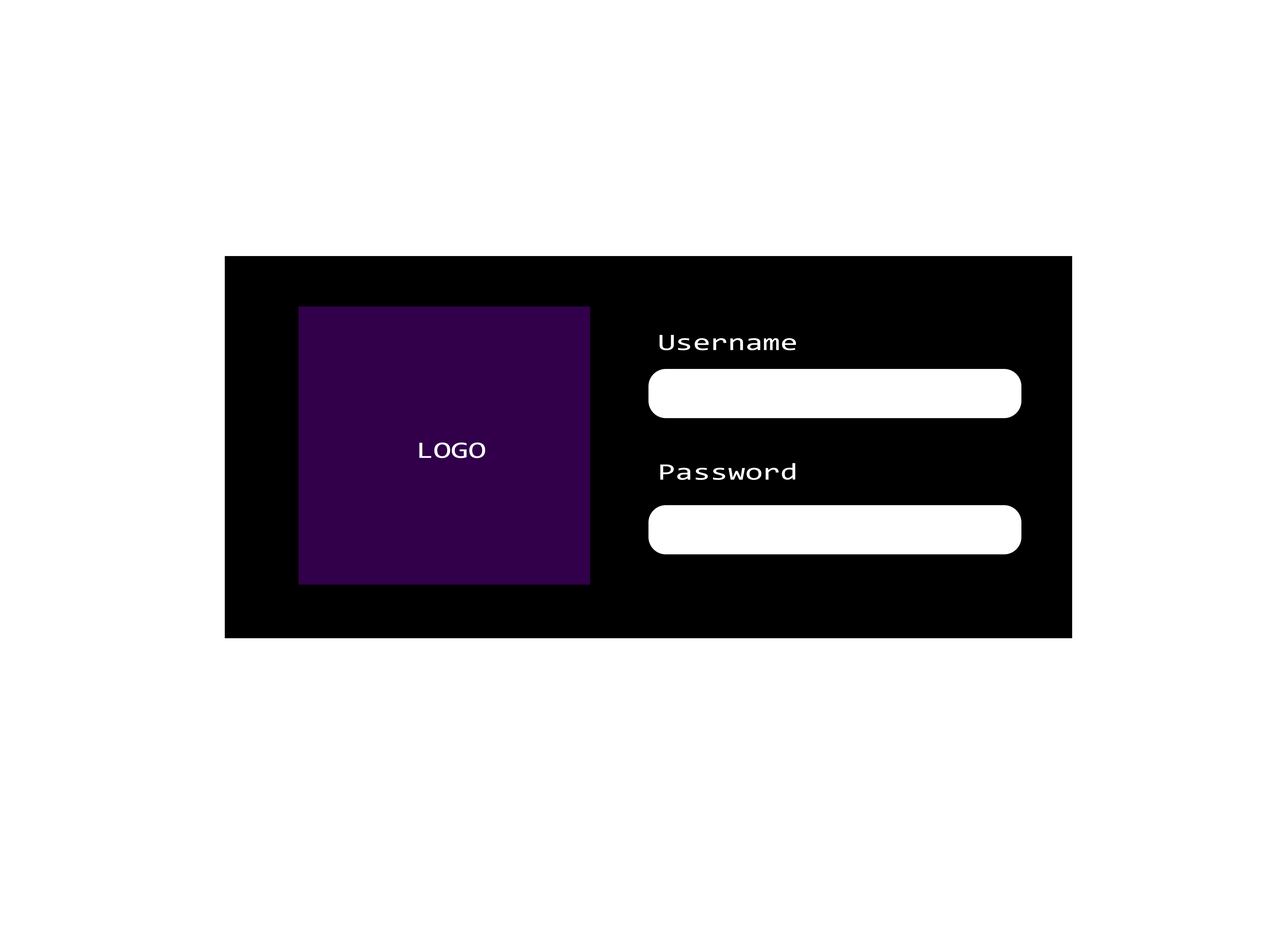
<style>
.page{position:relative;width:1261px;height:946px;background:#ffffff}
.page>*{position:absolute;margin:0}
.t1{font:23.6px "Consolas";color:#ffffff;scale:1.35 1}
</style>
<div class="page">
<p class="t1" style="left:659px;top:335px;width:137px;height:15px">Username</p>
<p class="t1" style="left:419px;top:442px;width:66px;height:16px">LOGO</p>
<p class="t1" style="left:660px;top:463px;width:135px;height:17px">Password</p>
</div>
